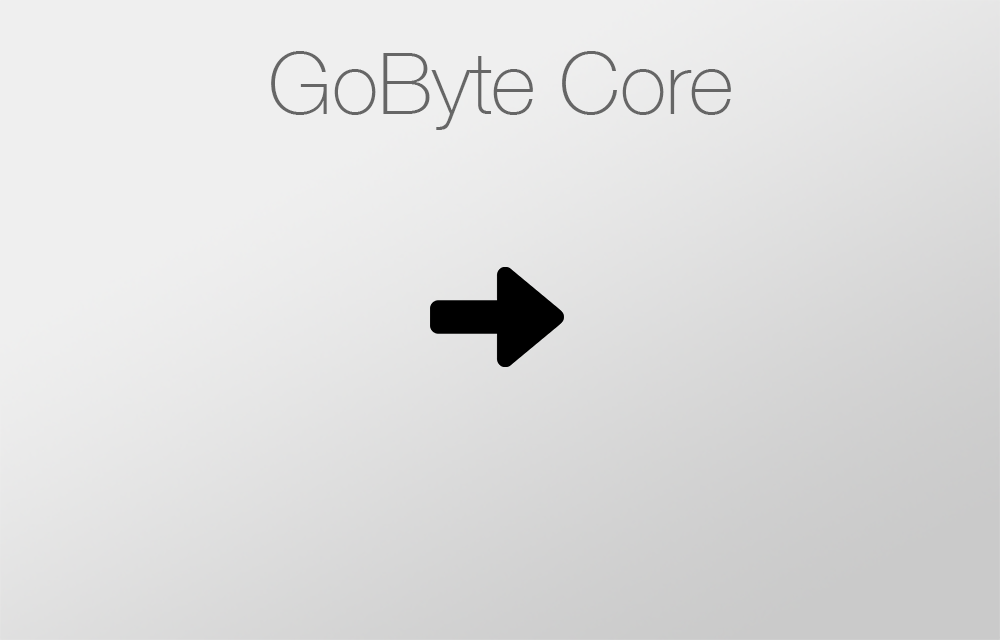
<style>
.page{position:relative;width:1000px;height:640px}
.page>*{position:absolute;margin:0}
.t1{font:85.7px "HelveticaNeue-Thin";color:#666666}
</style>
<div class="page">
<p class="t1" style="left:271px;top:51px;width:460px;height:79px">GoByte Core</p>
</div>
